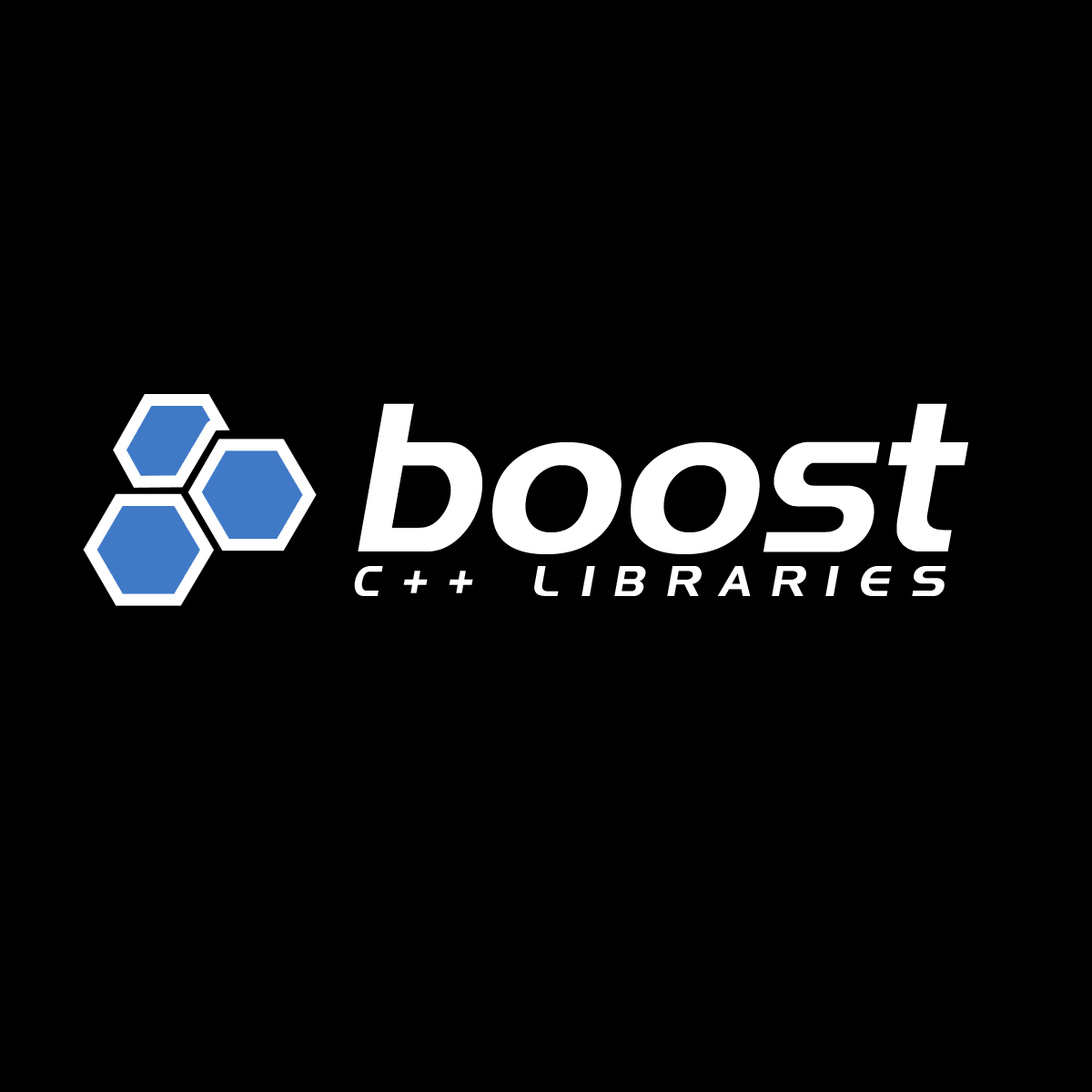
<style>
.page{position:relative;width:1092px;height:1092px;background:#000000}
.page>*{position:absolute;margin:0}
.t1{font:210.6px "Denmark";color:#ffffff;font-style:italic}
.t2{font:42.8px "Denmark";letter-spacing:0.49em;color:#ffffff;text-transform:uppercase;font-style:italic}
</style>
<div class="page">
<p class="t1" style="left:358px;top:403px;width:611px;height:151px">boost</p>
<p class="t2" style="left:354px;top:566px;width:592px;height:30px">c++ libraries</p>
</div>
